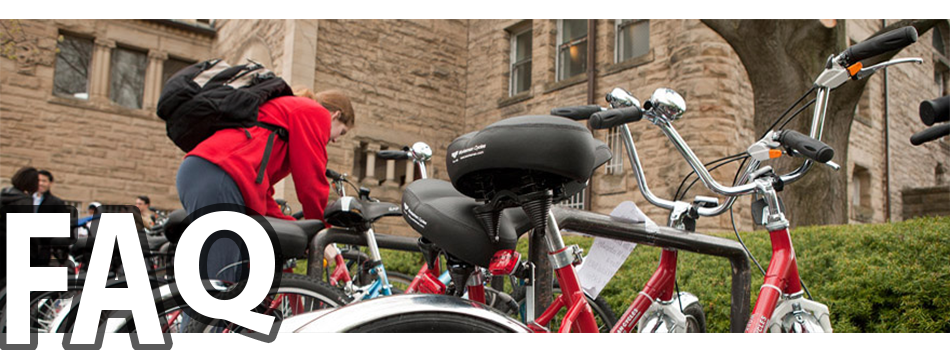
<style>
.page{position:relative;width:950px;height:350px}
.page>*{position:absolute;margin:0}
.t1{font:193.8px "MyriadPro-Bold";color:#ffffff;scale:0.8 1}
.t2{font:155px "MyriadPro-Bold";color:#ffffff}
</style>
<div class="page">
<p class="t1" style="left:6px;top:211px;width:270px;height:133px">FA<span class="t2">Q</span></p>
</div>
